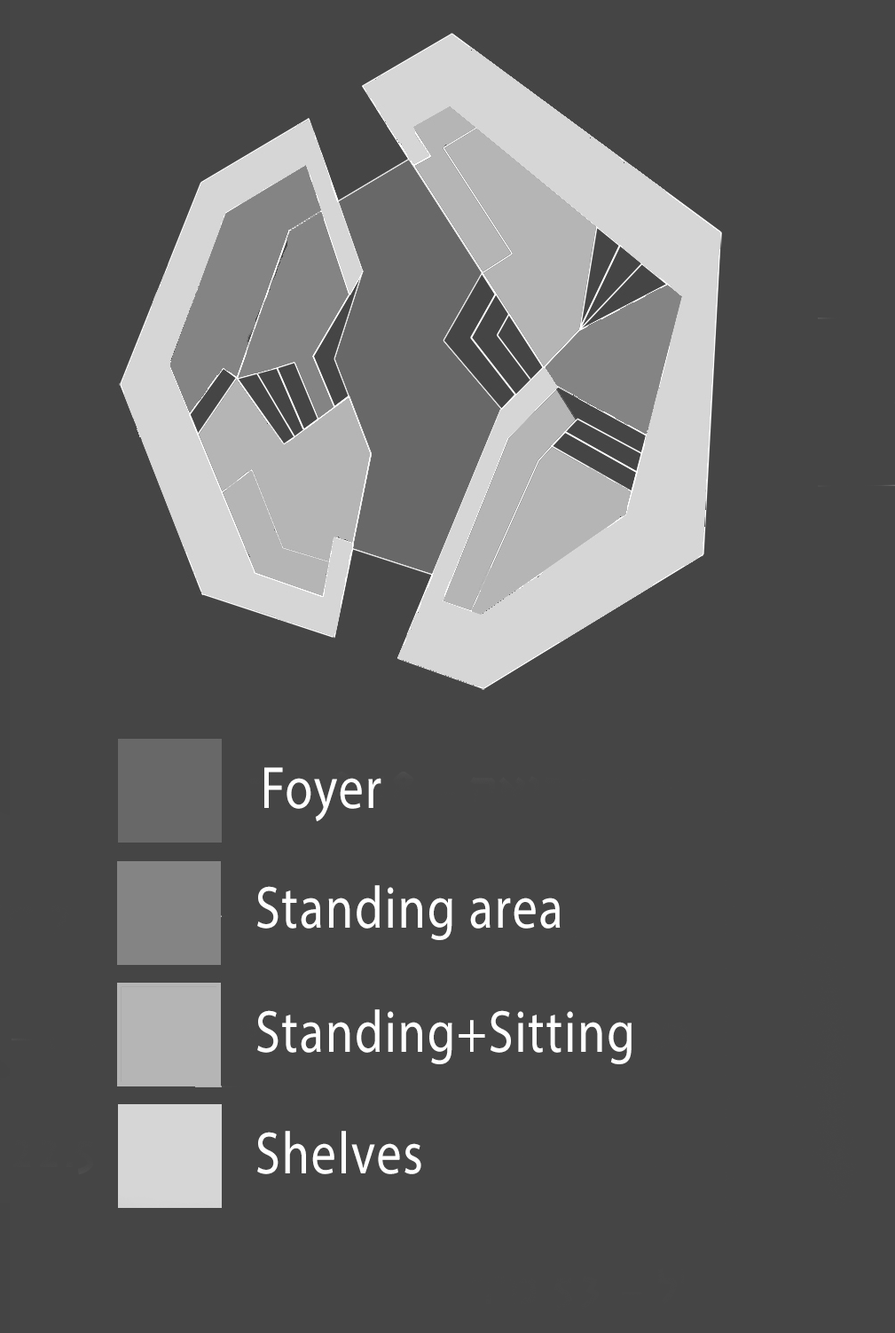
<style>
.page{position:relative;width:895px;height:1333px;background:#454545}
.page>*{position:absolute;margin:0}
.t1{font:59.7px "MyriadPro-Regular";letter-spacing:0.03em;color:#ffffff;scale:0.84 1}
</style>
<div class="page">
<p class="t1" style="left:264px;top:767px;width:117px;height:54px">Foyer</p>
<p class="t1" style="left:257px;top:885px;width:303px;height:55px">Standing area</p>
<p class="t1" style="left:257px;top:1009px;width:374px;height:55px">Standing+Sitting</p>
<p class="t1" style="left:257px;top:1131px;width:164px;height:43px">Shelves</p>
</div>
